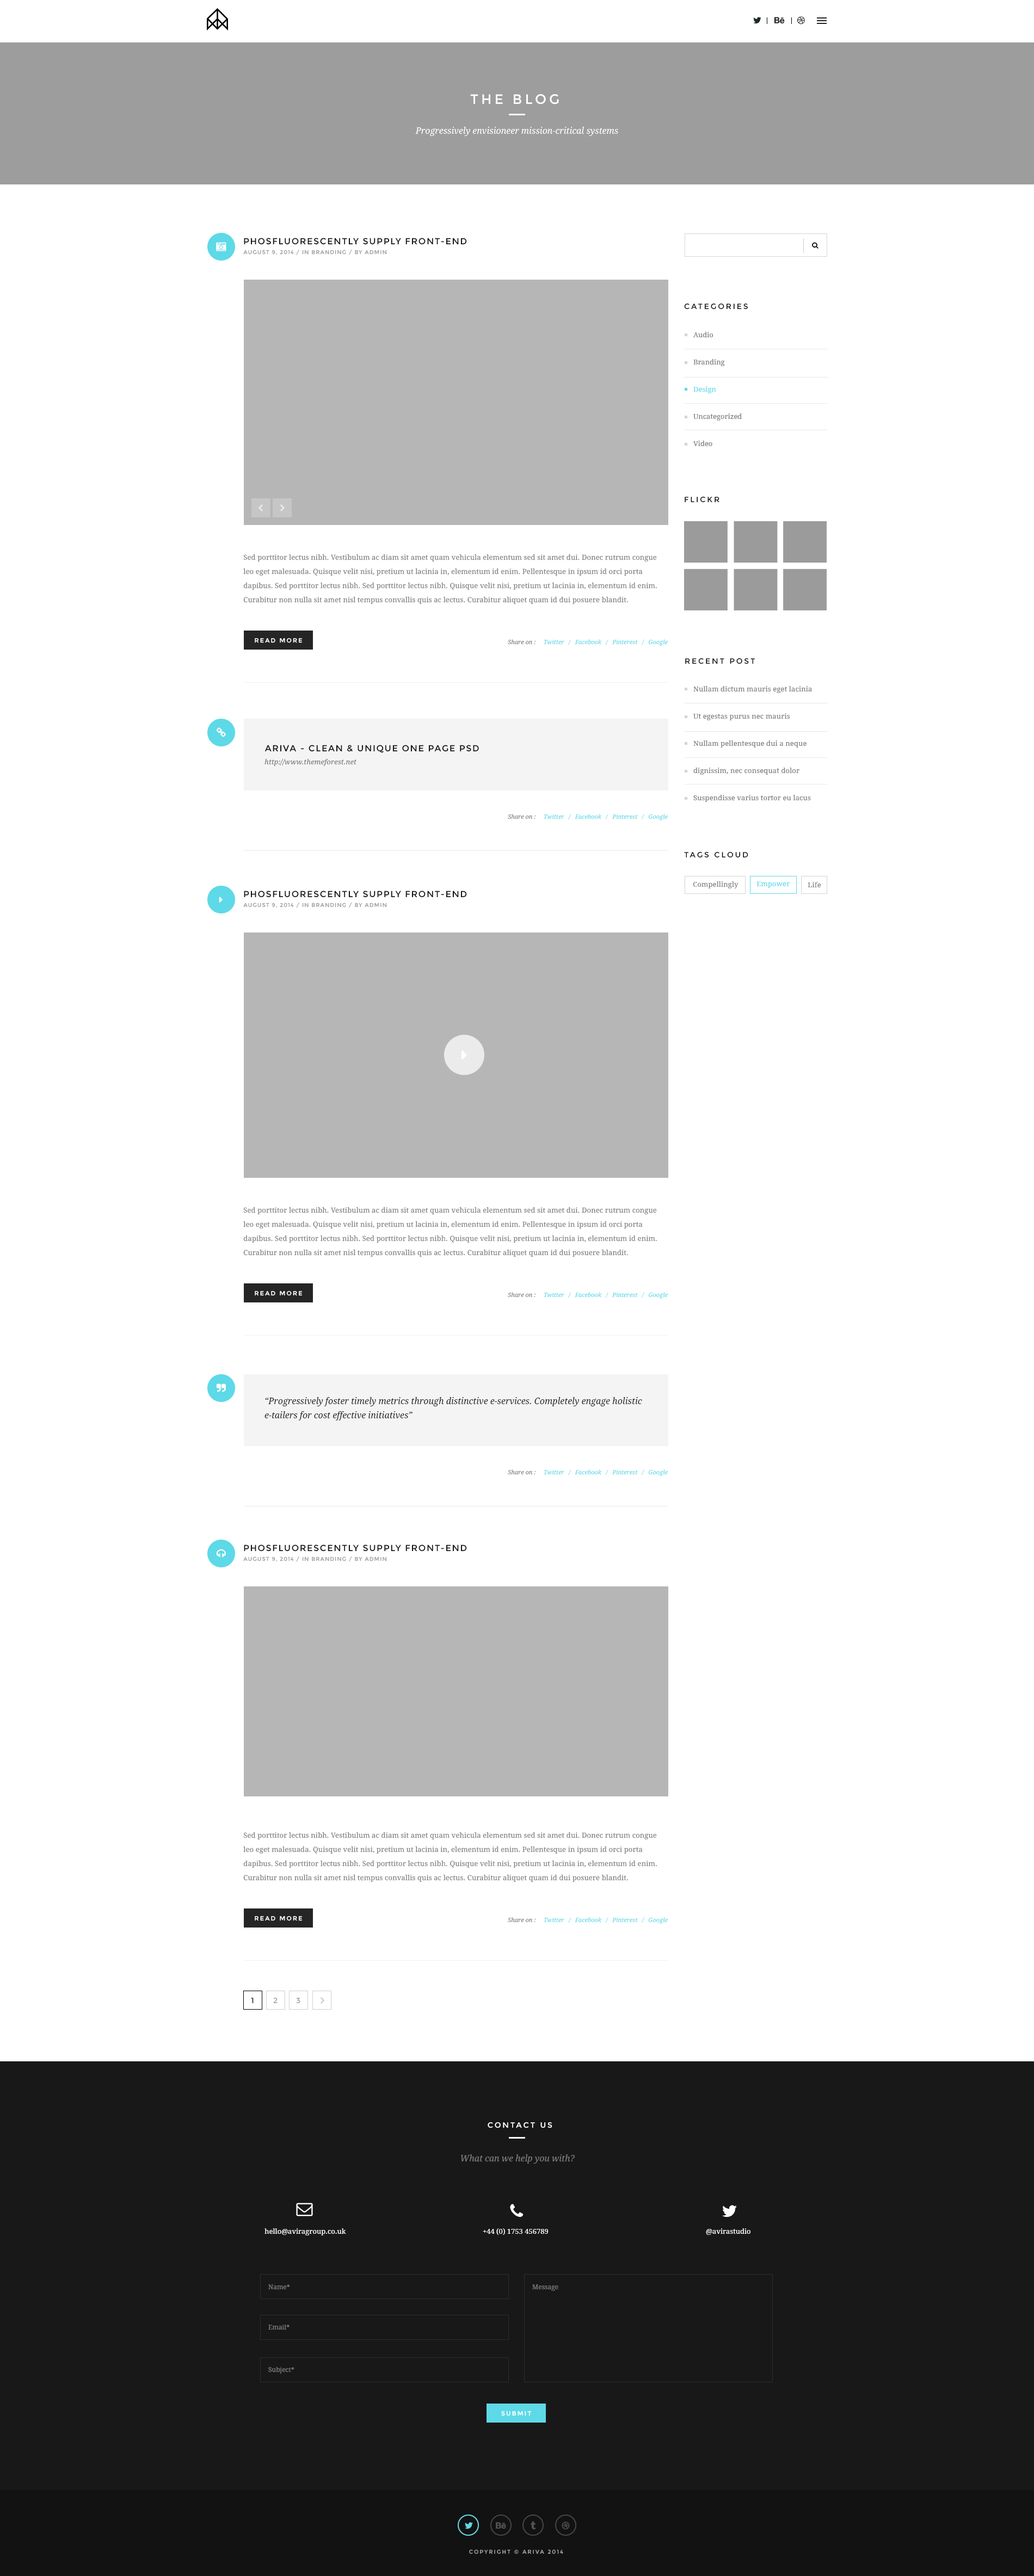
<style>
.page{position:relative;width:1034px;height:2576px;background:#ffffff}
.page>*{position:absolute;margin:0}
.t1{font:13.6px "Montserrat-Regular";letter-spacing:0.2em;color:#ffffff}
.t2{font:8.7px "DroidSerif-Italic";color:#ffffff}
.t3{font:8.7px "Montserrat-Regular";letter-spacing:0.1em;color:#181818;text-transform:uppercase}
.t4{font:5.4px "Montserrat-Regular";letter-spacing:0.1em;color:#9f9f9f;text-transform:uppercase}
.t5{font:7.6px "Montserrat-Regular";letter-spacing:0.2em;color:#181818;text-transform:uppercase}
.t6{font:7.1px/27.2px "DroidSerif";color:#7e7d7d}
.t7{font:7.1px/27.2px "DroidSerif";color:#5ed9e7}
.t8{font:7.1px/14.1px "DroidSerif";letter-spacing:0.01em;color:#7e7d7d}
.t9{font:6px "Montserrat-Regular";letter-spacing:0.2em;color:#ffffff}
.t10{font:6px "DroidSerif-Italic";color:#5ed9e7}
.t11{font:6px "DroidSerif-Italic";color:#7e7d7d}
.t12{font:7.1px/27.2px "DroidSerif";letter-spacing:0.01em;color:#7e7d7d}
.t13{font:7.1px "DroidSerif-Italic";letter-spacing:0.01em;color:#7e7d7d}
.t14{font:7.1px "DroidSerif";letter-spacing:0.01em;color:#7e7d7d}
.t15{font:7.1px "DroidSerif";letter-spacing:0.01em;color:#5ed9e7}
.t16{font:8.7px/14.1px "DroidSerif-Italic";color:#252525}
.t17{font:7.6px "Montserrat-Regular";letter-spacing:0.2em;color:#181818}
.t18{font:7.6px "Montserrat-Regular";letter-spacing:0.2em;color:#a3a3a3}
.t19{font:7.6px "Montserrat-Regular";letter-spacing:0.2em;color:#ffffff;text-transform:uppercase}
.t20{font:8.7px "DroidSerif-Italic";color:#7e7d7d}
.t21{font:7.1px "DroidSerif";color:#ffffff}
.t22{font:6.5px "DroidSerif";color:#7e7d7d}
.t23{font:5.4px "Montserrat-Regular";letter-spacing:0.2em;color:#9f9f9f;text-transform:uppercase}
</style>
<div class="page">
<p class="t1" style="left:470px;top:94px;width:89px;height:10px">THE BLOG</p>
<p class="t2" style="left:415px;top:127px;width:203px;height:9px">Progressively envisioneer mission-critical systems</p>
<p class="t3" style="left:244px;top:238px;width:223px;height:7px">Phosfluorescently supply front-end</p>
<p class="t4" style="left:243px;top:249px;width:144px;height:6px">AUGUST 9, 2014 / IN Branding / BY Admin</p>
<p class="t5" style="left:684px;top:303px;width:64px;height:7px">CATEGORIES</p>
<p class="t6" style="left:693px;top:332px;width:49px;height:114px">Audio<br>Branding<br><span class="t7">Design<br></span>Uncategorized<br>Video</p>
<p class="t5" style="left:684px;top:496px;width:35px;height:7px">FLICKR</p>
<p class="t8" style="left:243px;top:554px;width:414px;height:50px">Sed porttitor lectus nibh. Vestibulum ac diam sit amet quam vehicula elementum sed sit amet dui. Donec rutrum congue leo eget malesuada. Quisque velit nisi, pretium ut lacinia in, elementum id enim. Pellentesque in ipsum id orci porta dapibus. Sed porttitor lectus nibh. Sed porttitor lectus nibh. Quisque velit nisi, pretium ut lacinia in, elementum id enim. Curabitur non nulla sit amet nisl tempus convallis quis ac lectus. Curabitur aliquet quam id dui posuere blandit.</p>
<p class="t9" style="left:255px;top:638px;width:47px;height:5px">READ MORE</p>
<p class="t10" style="left:508px;top:639px;width:160px;height:7px"><span class="t11">Share on :     </span>Twitter   /   Facebook   /   Pinterest   /   Google</p>
<p class="t5" style="left:685px;top:658px;width:70px;height:6px">RECENT POST</p>
<p class="t12" style="left:693px;top:686px;width:119px;height:116px">Nullam dictum mauris eget lacinia <br>Ut egestas purus nec mauris <br>Nullam pellentesque dui a neque dignissim, nec consequat dolor <br>Suspendisse varius tortor eu lacus</p>
<p class="t3" style="left:264px;top:745px;width:215px;height:8px">Ariva - Clean &amp; Unique One Page PSD</p>
<p class="t13" style="left:264px;top:759px;width:92px;height:7px">http://www.themeforest.net</p>
<p class="t10" style="left:508px;top:814px;width:160px;height:6px"><span class="t11">Share on :     </span>Twitter   /   Facebook   /   Pinterest   /   Google</p>
<p class="t5" style="left:684px;top:851px;width:64px;height:7px">TAGS CLOUD</p>
<p class="t14" style="left:693px;top:881px;width:45px;height:7px">Compellingly</p>
<p class="t15" style="left:756px;top:881px;width:34px;height:7px">Empower</p>
<p class="t14" style="left:807px;top:882px;width:14px;height:5px">Life</p>
<p class="t3" style="left:244px;top:891px;width:223px;height:7px">Phosfluorescently supply front-end</p>
<p class="t4" style="left:243px;top:902px;width:144px;height:6px">AUGUST 9, 2014 / IN Branding / BY Admin</p>
<p class="t8" style="left:243px;top:1207px;width:414px;height:50px">Sed porttitor lectus nibh. Vestibulum ac diam sit amet quam vehicula elementum sed sit amet dui. Donec rutrum congue leo eget malesuada. Quisque velit nisi, pretium ut lacinia in, elementum id enim. Pellentesque in ipsum id orci porta dapibus. Sed porttitor lectus nibh. Sed porttitor lectus nibh. Quisque velit nisi, pretium ut lacinia in, elementum id enim. Curabitur non nulla sit amet nisl tempus convallis quis ac lectus. Curabitur aliquet quam id dui posuere blandit.</p>
<p class="t9" style="left:255px;top:1291px;width:47px;height:5px">READ MORE</p>
<p class="t10" style="left:508px;top:1292px;width:160px;height:7px"><span class="t11">Share on :     </span>Twitter   /   Facebook   /   Pinterest   /   Google</p>
<p class="t16" style="left:264px;top:1397px;width:378px;height:23px">“Progressively foster timely metrics through distinctive e-services. Completely engage holistic e-tailers for cost effective initiatives”</p>
<p class="t10" style="left:508px;top:1469px;width:160px;height:7px"><span class="t11">Share on :     </span>Twitter   /   Facebook   /   Pinterest   /   Google</p>
<p class="t3" style="left:244px;top:1545px;width:223px;height:7px">Phosfluorescently supply front-end</p>
<p class="t4" style="left:243px;top:1556px;width:144px;height:6px">AUGUST 9, 2014 / IN Branding / BY Admin</p>
<p class="t8" style="left:243px;top:1832px;width:414px;height:50px">Sed porttitor lectus nibh. Vestibulum ac diam sit amet quam vehicula elementum sed sit amet dui. Donec rutrum congue leo eget malesuada. Quisque velit nisi, pretium ut lacinia in, elementum id enim. Pellentesque in ipsum id orci porta dapibus. Sed porttitor lectus nibh. Sed porttitor lectus nibh. Quisque velit nisi, pretium ut lacinia in, elementum id enim. Curabitur non nulla sit amet nisl tempus convallis quis ac lectus. Curabitur aliquet quam id dui posuere blandit.</p>
<p class="t9" style="left:255px;top:1916px;width:47px;height:5px">READ MORE</p>
<p class="t10" style="left:508px;top:1917px;width:160px;height:7px"><span class="t11">Share on :     </span>Twitter   /   Facebook   /   Pinterest   /   Google</p>
<p class="t17" style="left:251px;top:1998px;width:3px;height:6px">1</p>
<p class="t18" style="left:273px;top:1997px;width:4px;height:7px">2</p>
<p class="t18" style="left:296px;top:1998px;width:4px;height:6px">3</p>
<p class="t19" style="left:487px;top:2122px;width:65px;height:6px">CONTACT US</p>
<p class="t20" style="left:461px;top:2154px;width:113px;height:10px">What can we help you with?</p>
<p class="t21" style="left:264px;top:2228px;width:82px;height:7px">hello@aviragroup.co.uk</p>
<p class="t21" style="left:483px;top:2228px;width:65px;height:7px">+44 (0) 1753 456789</p>
<p class="t21" style="left:706px;top:2228px;width:44px;height:7px">@avirastudio</p>
<p class="t22" style="left:268px;top:2284px;width:22px;height:5px">Name*</p>
<p class="t22" style="left:532px;top:2284px;width:26px;height:7px">Message</p>
<p class="t22" style="left:268px;top:2325px;width:21px;height:5px">Email*</p>
<p class="t22" style="left:268px;top:2367px;width:26px;height:7px">Subject*</p>
<p class="t9" style="left:501px;top:2411px;width:30px;height:5px">SUBMIT</p>
<p class="t23" style="left:469px;top:2549px;width:94px;height:5px">COPYRIGHT © ARIVA 2014</p>
</div>
